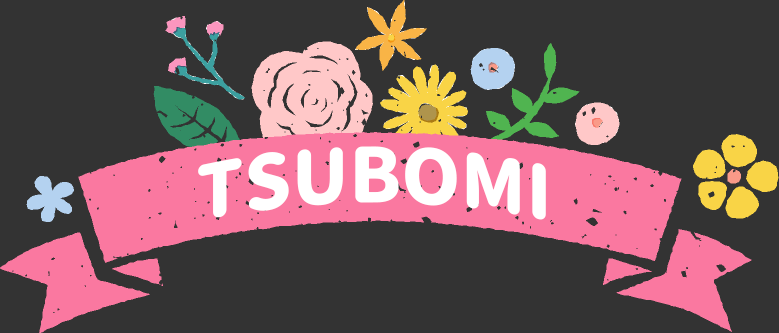
<style>
.page{position:relative;width:779px;height:333px;background:#333333}
.page>*{position:absolute;margin:0}
.t1{font:75px "Corporate-Logo-Rounded";color:#ffffff}
</style>
<div class="page">
<p class="t1" style="left:198px;top:146px;width:348px;height:74px">TSUBOMI</p>
</div>
